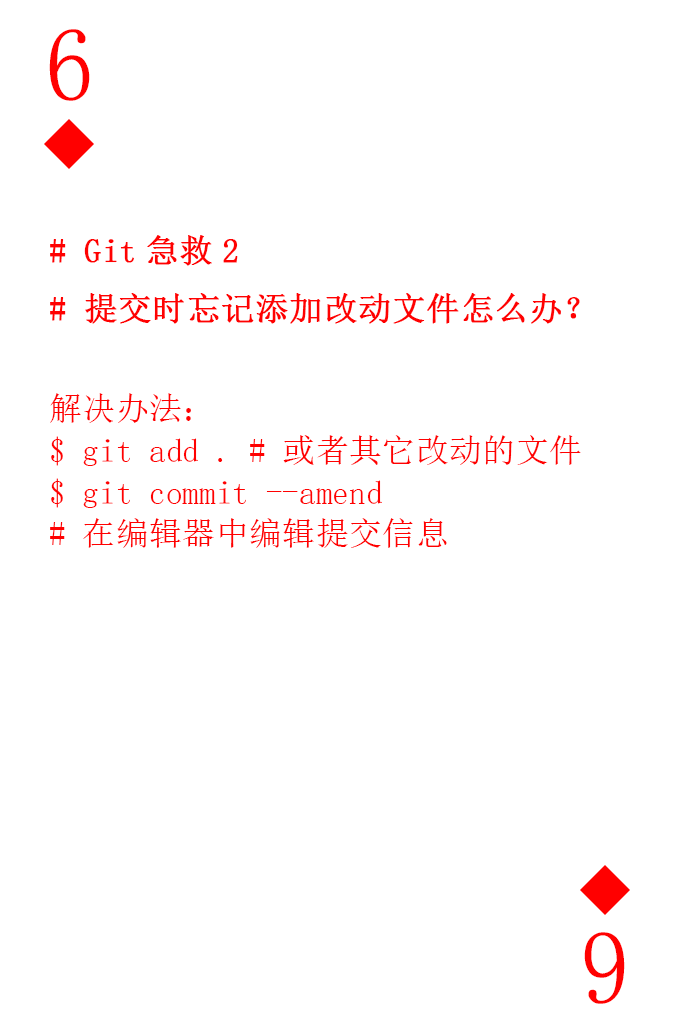
<style>
.page{position:relative;width:673px;height:1028px;background:#ffffff}
.page>*{position:absolute;margin:0}
.t1{font:104.2px "SimSun-ExtB";color:#ff0101;scale:0.93 1}
.t2{font:33.3px/41.7px "SimSun";color:#ff0101}
.t3{font:33.3px "SimSun";color:#ff0101;font-weight:bold}
</style>
<div class="page">
<p class="t1" style="left:49px;top:29px;width:41px;height:72px">6</p>
<p class="t2" style="left:50px;top:235px;width:531px;height:313px"><span class="t3"># Git急救2<br># 提交时忘记添加改动文件怎么办？<br></span><br>解决办法：<br>$ git add . # 或者其它改动的文件<br>$ git commit --amend<br># 在编辑器中编辑提交信息</p>
<p class="t1" style="left:584px;top:932px;width:41px;height:72px;rotate:180deg">6</p>
</div>
